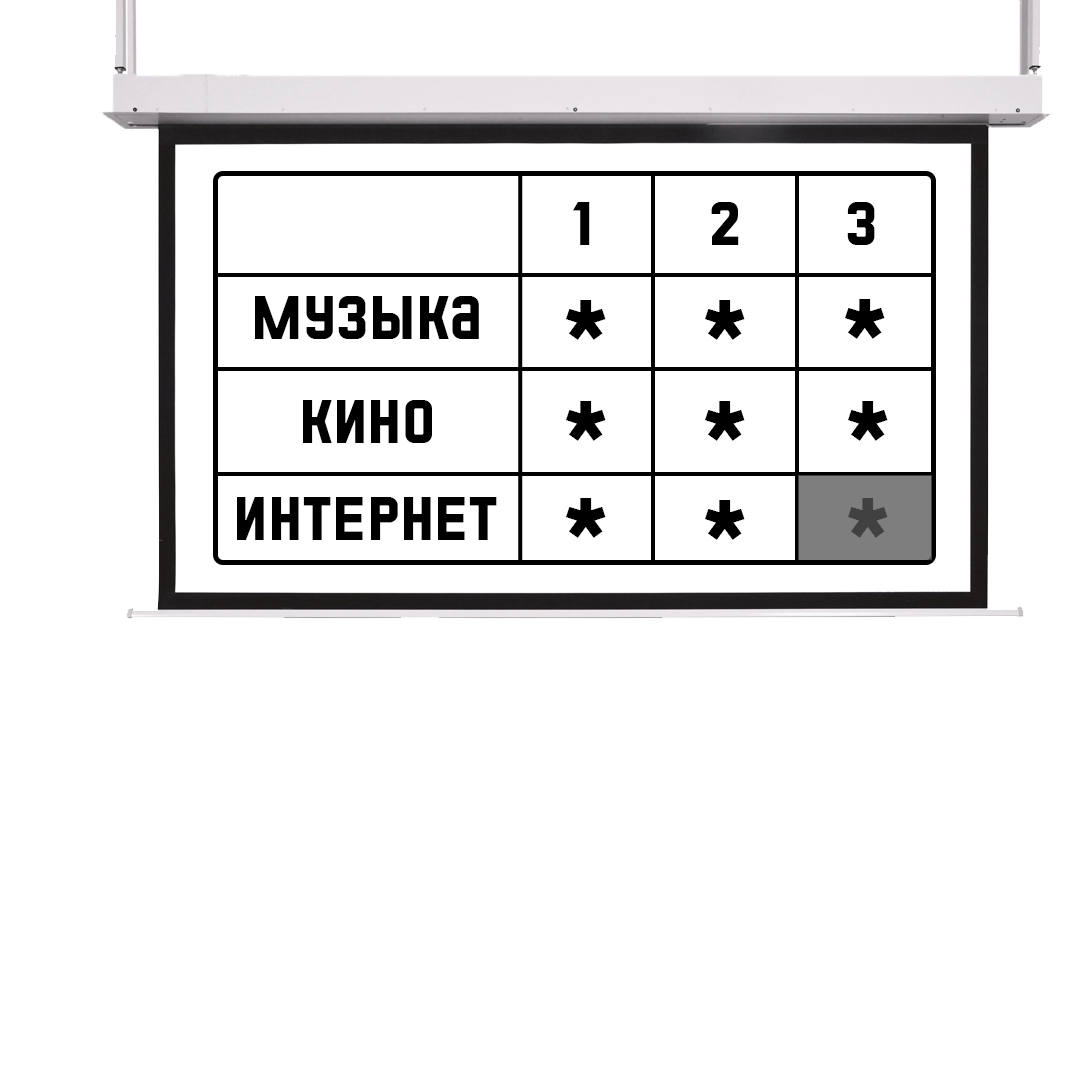
<style>
.page{position:relative;width:1077px;height:1080px;background:#ffffff}
.page>*{position:absolute;margin:0}
.t1{font:106px "KTFJermilov-Solid";color:#000000}
.t2{font:170.2px "KTFJermilov-Solid";color:#000000}
.t3{font:170.2px "KTFJermilov-Solid";color:#414141}
</style>
<div class="page">
<p class="t1" style="left:572px;top:202px;width:18px;height:43px">1</p>
<p class="t1" style="left:711px;top:202px;width:28px;height:43px">2</p>
<p class="t1" style="left:847px;top:202px;width:28px;height:43px">3</p>
<p class="t1" style="left:255px;top:296px;width:224px;height:43px">МУЗЫКА</p>
<p class="t2" style="left:566px;top:300px;width:40px;height:40px">*</p>
<p class="t2" style="left:705px;top:300px;width:40px;height:40px">*</p>
<p class="t2" style="left:845px;top:299px;width:40px;height:40px">*</p>
<p class="t1" style="left:303px;top:400px;width:129px;height:43px">КИНО</p>
<p class="t2" style="left:566px;top:401px;width:40px;height:40px">*</p>
<p class="t2" style="left:705px;top:401px;width:40px;height:40px">*</p>
<p class="t2" style="left:848px;top:401px;width:40px;height:40px">*</p>
<p class="t1" style="left:237px;top:497px;width:260px;height:43px">ИНТЕРНЕТ</p>
<p class="t2" style="left:566px;top:498px;width:40px;height:40px">*</p>
<p class="t2" style="left:705px;top:500px;width:40px;height:40px">*</p>
<p class="t3" style="left:848px;top:498px;width:40px;height:40px">*</p>
</div>
